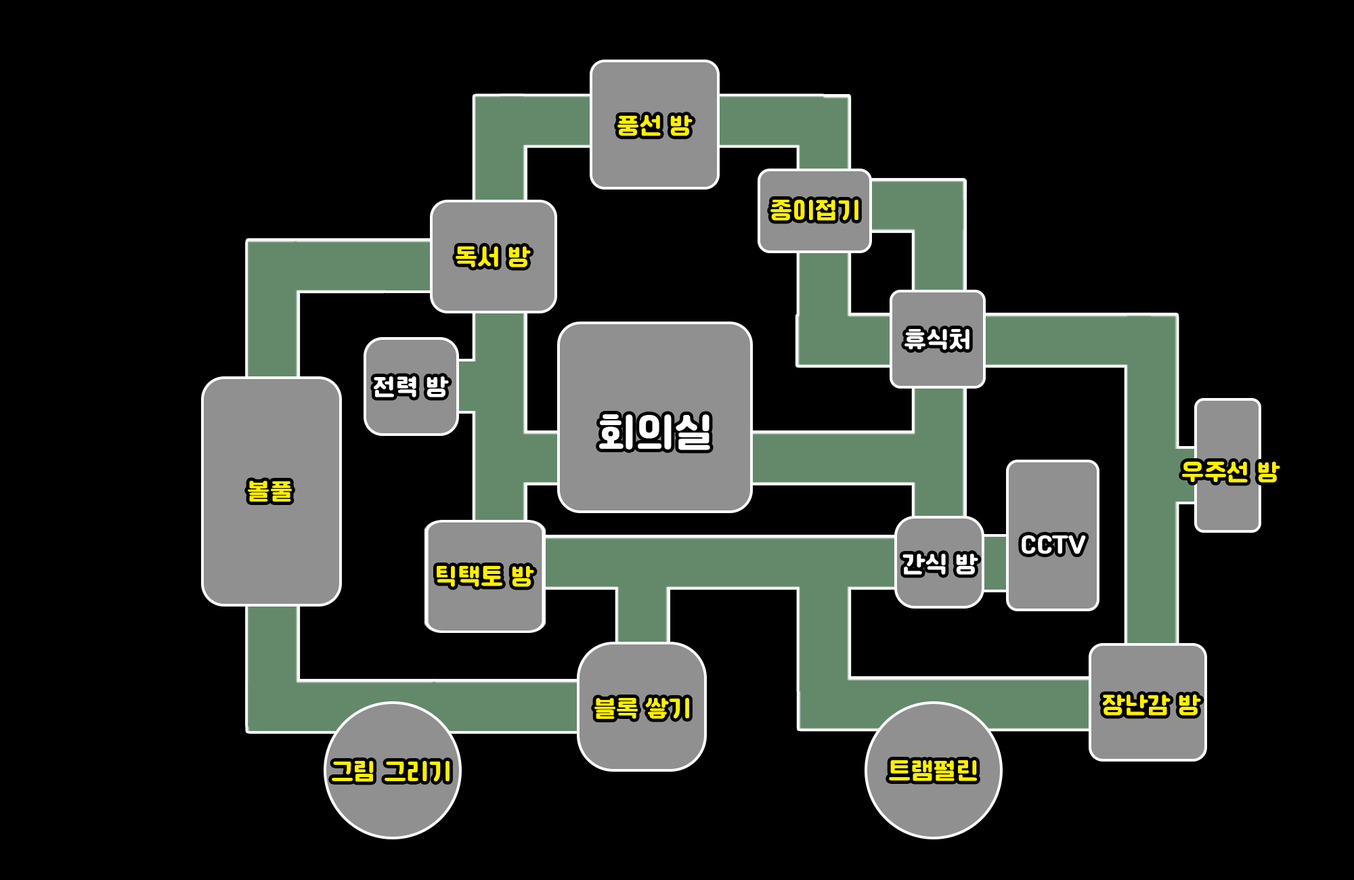
<style>
.page{position:relative;width:1354px;height:880px;background:#000000}
.page>*{position:absolute;margin:0}
.t1{font:24px "Cafe24Ssurround";color:#fff000}
.t2{font:24px "Cafe24Ssurround";color:#ffffff}
.t3{font:40.6px "Cafe24Ssurround";color:#ffffff}
</style>
<div class="page">
<p class="t1" style="left:618px;top:115px;width:75px;height:21px">풍선 방</p>
<p class="t1" style="left:771px;top:200px;width:88px;height:21px">종이접기</p>
<p class="t1" style="left:456px;top:247px;width:75px;height:21px">독서 방</p>
<p class="t2" style="left:905px;top:329px;width:65px;height:21px">휴식처</p>
<p class="t2" style="left:374px;top:377px;width:75px;height:21px">전력 방</p>
<p class="t3" style="left:599px;top:414px;width:111px;height:36px">회의실</p>
<p class="t1" style="left:1182px;top:462px;width:99px;height:21px">우주선 방</p>
<p class="t1" style="left:248px;top:481px;width:44px;height:21px">볼풀</p>
<p class="t2" style="left:1022px;top:535px;width:64px;height:19px">CCTV</p>
<p class="t2" style="left:903px;top:554px;width:76px;height:21px">간식 방</p>
<p class="t1" style="left:437px;top:566px;width:97px;height:21px">틱택토 방</p>
<p class="t1" style="left:595px;top:698px;width:94px;height:21px">블록 쌓기</p>
<p class="t1" style="left:1103px;top:695px;width:98px;height:21px">장난감 방</p>
<p class="t1" style="left:332px;top:761px;width:118px;height:21px">그림 그리기</p>
<p class="t1" style="left:889px;top:761px;width:88px;height:21px">트램펄린</p>
</div>
